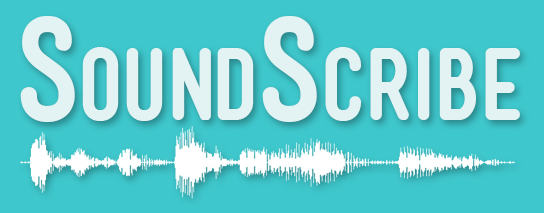
<style>
.page{position:relative;width:544px;height:213px;background:#3ec7cc}
.page>*{position:absolute;margin:0}
.t1{font:133.5px "MenschBold";color:#e3f3f4;font-variant:small-caps}
</style>
<div class="page">
<p class="t1" style="left:20px;top:16px;width:500px;height:106px">SoundScribe</p>
</div>
